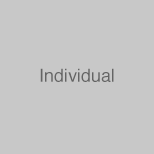
<style>
.page{position:relative;width:154px;height:154px;background:#c8c8c8}
.page>*{position:absolute;margin:0}
.t1{font:18px "Helvetica";color:#646464}
</style>
<div class="page">
<p class="t1" style="left:40px;top:68px;width:74px;height:14px">Individual</p>
</div>
